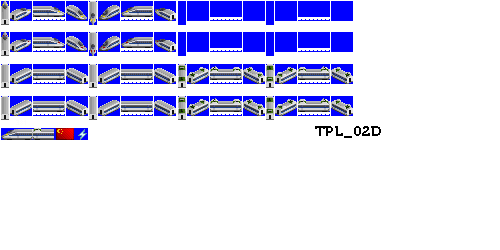
<style>
.page{position:relative;width:500px;height:250px;background:#ffffff}
.page>*{position:absolute;margin:0}
.t1{font:14px "Museo700-Regular";letter-spacing:0.075em;color:#000000;text-transform:uppercase}
</style>
<div class="page">
<p class="t1" style="left:315px;top:126px;width:66px;height:12px">tpl_02d</p>
</div>
